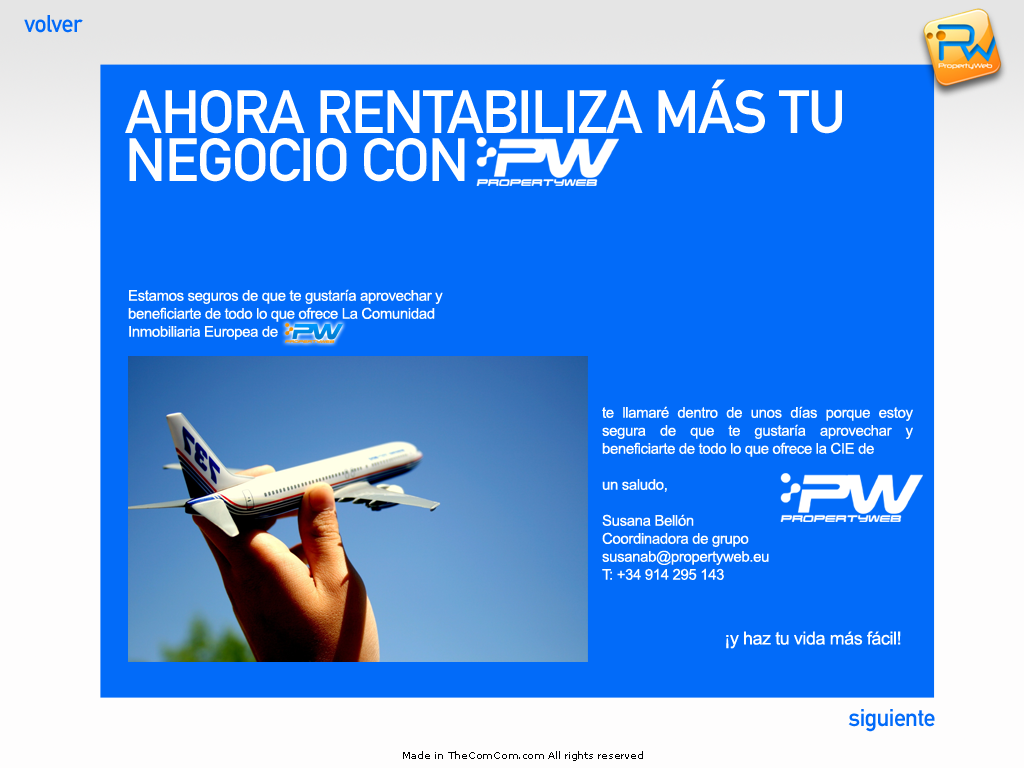
<style>
.page{position:relative;width:1024px;height:768px;background:#026bf9}
.page>*{position:absolute;margin:0}
.t1{font:24px "DINMittelschriftStd";letter-spacing:-0.025em;color:#026bf9}
.t2{font:60px/48px "DINMittelschriftStd";letter-spacing:-0.025em;color:#ffffff;text-transform:uppercase}
.t3{font:15px "ArialMT";letter-spacing:-0.025em;color:#ffffff}
.t4{font:18px "ArialMT";letter-spacing:-0.025em;color:#ffffff}
.t5{font:10px "MSReferenceSansSerif";letter-spacing:-0.025em;color:#010101}
</style>
<div class="page">
<p class="t1" style="left:24px;top:15px;width:59px;height:18px">volver</p>
<p class="t2" style="left:125px;top:79px;width:717px;height:103px">ahora rentabiliza más tu negocio con</p>
<p class="t3" style="left:128px;top:289px;width:315px;height:51px">Estamos seguros de que te gustaría aprovechar y beneficiarte de todo lo que ofrece La Comunidad Inmobiliaria Europea de</p>
<p class="t3" style="left:602px;top:406px;width:311px;height:174px;text-align:justify">te llamaré dentro de unos días porque estoy segura de que te gustaría aprovechar y beneficiarte de todo lo que ofrece la CIE de<br><br>un saludo,<br><br>Susana Bellón<br>Coordinadora de grupo<br>susanab@propertyweb.eu<br>T: +34 914 295 143</p>
<p class="t4" style="left:726px;top:631px;width:175px;height:18px">¡y haz tu vida más fácil!</p>
<p class="t1" style="left:848px;top:709px;width:87px;height:23px">siguiente</p>
<p class="t5" style="left:403px;top:751px;width:240px;height:10px">Made in TheComCom.com All rights reserved</p>
</div>
